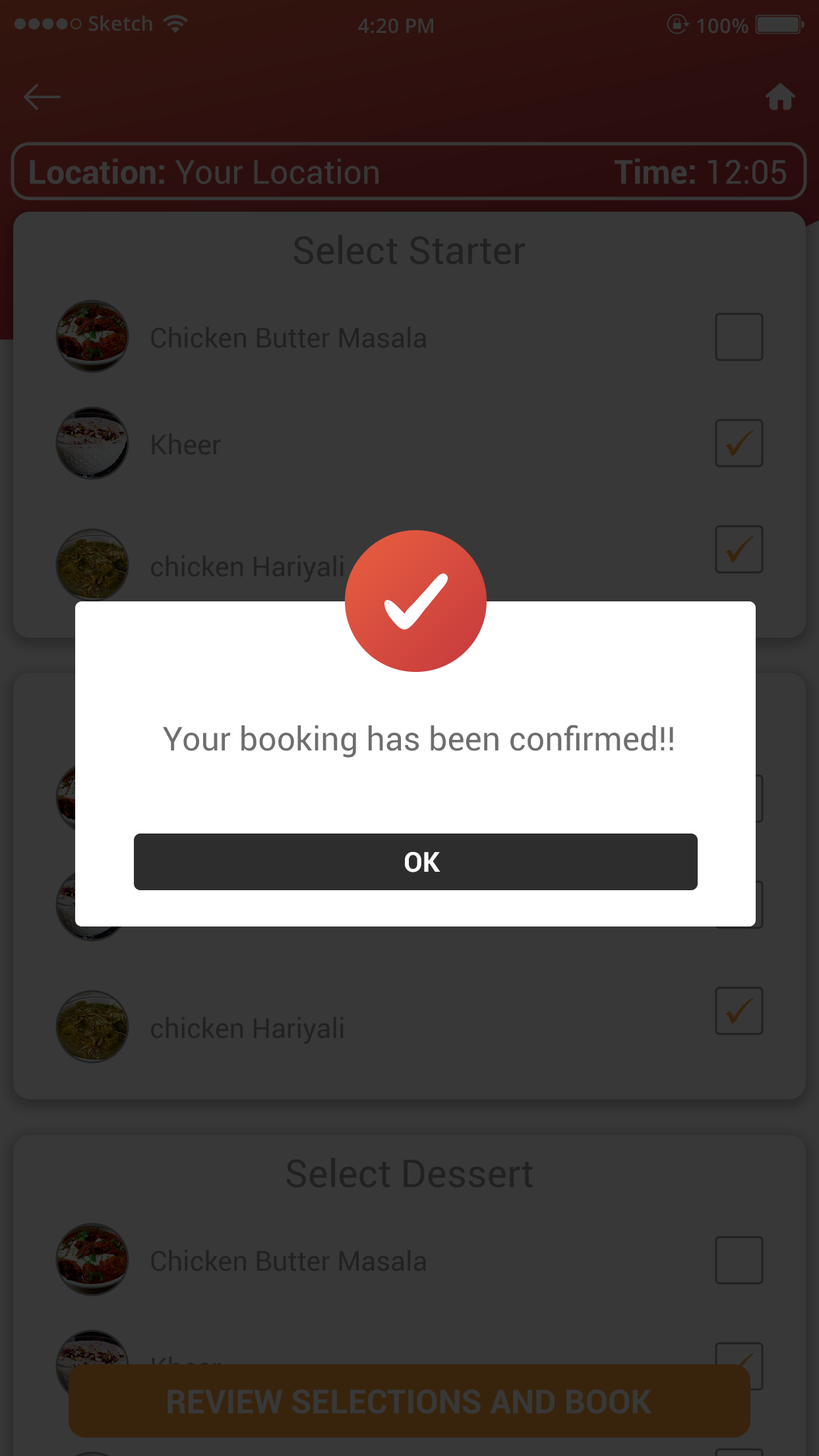
<style>
.page{position:relative;width:819px;height:1456px;background:#383838}
.page>*{position:absolute;margin:0}
.t1{font:20.1px "OpenSans-Semibold";color:#383838}
.t2{font:33px "Roboto-Regular";color:#383838}
.t3{font:33px "Roboto-Bold";color:#383838}
.t4{font:38.5px "Roboto-Regular";color:#212122}
.t5{font:27.5px "Roboto-Regular";color:#212122}
.t6{font:33px "Roboto-Regular";color:#6e6e6e}
.t7{font:27.5px "Roboto-Bold";color:#ffffff}
.t8{font:27.5px "Roboto-Regular";color:#38240d}
</style>
<div class="page">
<p class="t1" style="left:88px;top:15px;width:64px;height:16px">Sketch</p>
<p class="t1" style="left:358px;top:18px;width:75px;height:16px">4:20 PM</p>
<p class="t1" style="left:697px;top:18px;width:51px;height:16px">100%</p>
<p class="t2" style="left:30px;top:158px;width:349px;height:26px"><span class="t3">Location: </span>Your Location</p>
<p class="t3" style="left:615px;top:158px;width:171px;height:26px">Time: <span class="t2">12:05</span></p>
<p class="t4" style="left:293px;top:235px;width:233px;height:29px">Select Starter</p>
<p class="t5" style="left:151px;top:326px;width:275px;height:22px">Chicken Butter Masala</p>
<p class="t5" style="left:152px;top:433px;width:69px;height:22px">Kheer</p>
<p class="t5" style="left:151px;top:555px;width:193px;height:27px">chicken Hariyali</p>
<p class="t6" style="left:163px;top:725px;width:510px;height:33px">Your booking has been confirmed!!</p>
<p class="t7" style="left:405px;top:852px;width:35px;height:20px">OK</p>
<p class="t5" style="left:151px;top:1017px;width:193px;height:27px">chicken Hariyali</p>
<p class="t4" style="left:286px;top:1158px;width:247px;height:30px">Select Dessert</p>
<p class="t5" style="left:151px;top:1250px;width:275px;height:21px">Chicken Butter Masala</p>
<p class="t8" style="left:152px;top:1356px;width:69px;height:22px">Kheer</p>
<p class="t3" style="left:167px;top:1389px;width:485px;height:25px">REVIEW SELECTIONS AND BOOK</p>
</div>
